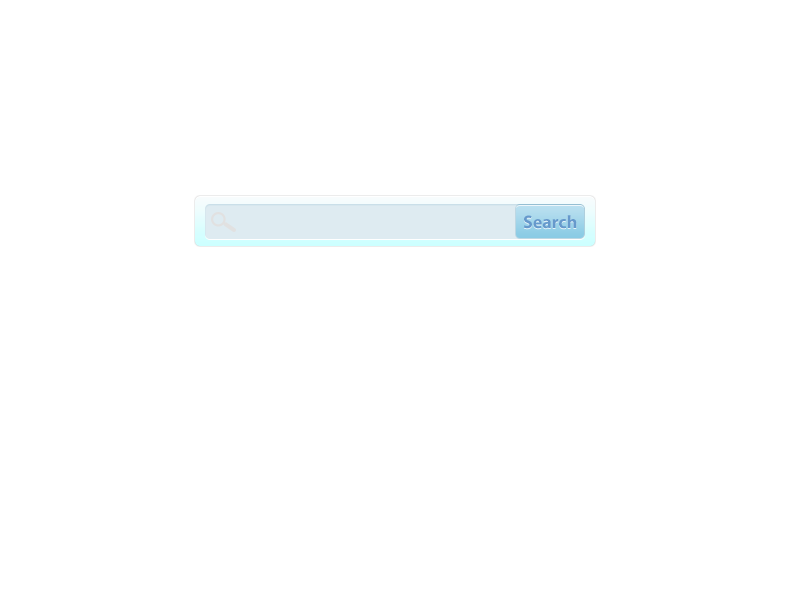
<style>
.page{position:relative;width:800px;height:600px;background:#ffffff}
.page>*{position:absolute;margin:0}
.t1{font:18px "MyriadPro-Bold";color:#6699cc}
</style>
<div class="page">
<p class="t1" style="left:523px;top:215px;width:54px;height:14px">Search</p>
</div>
